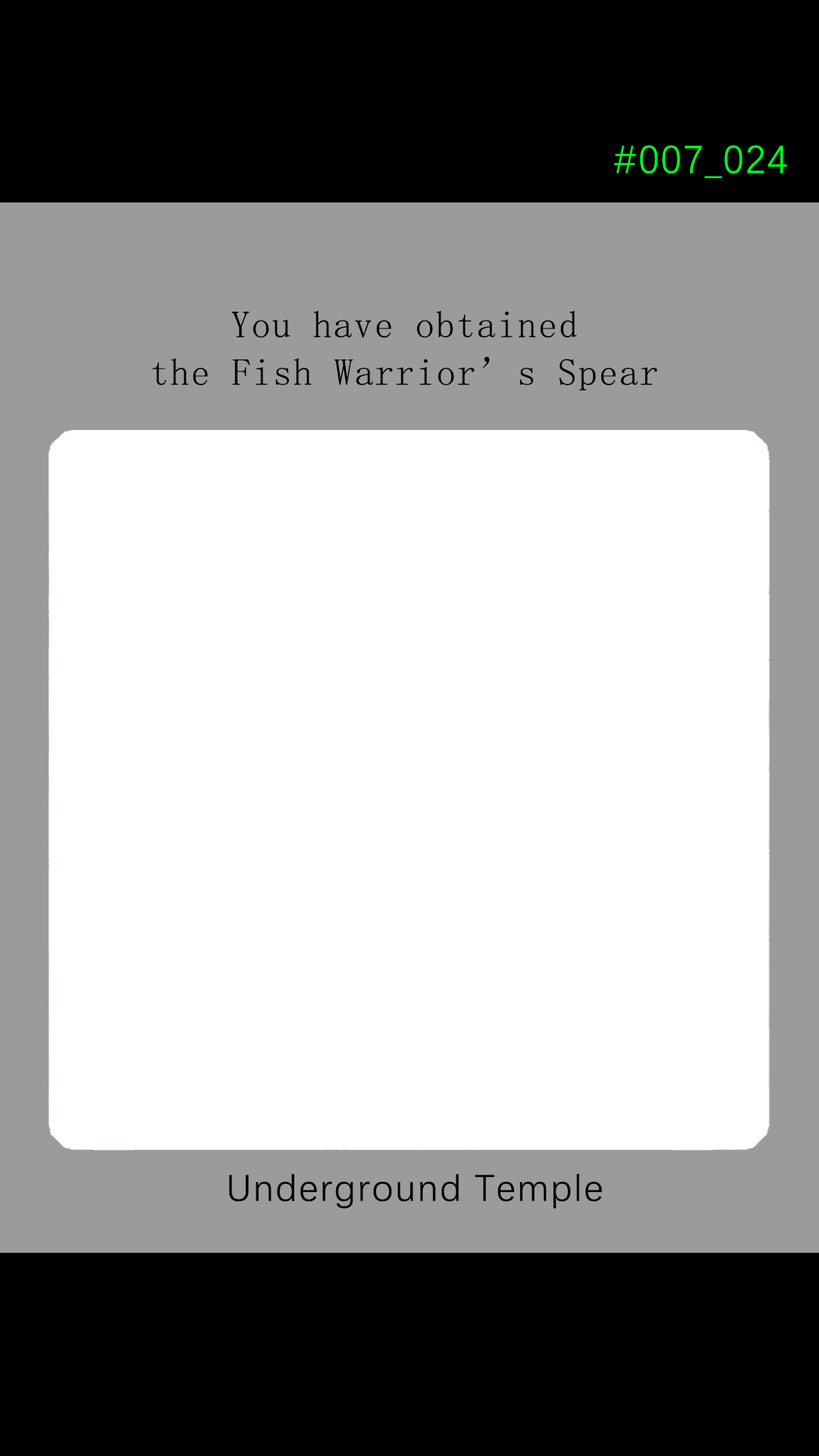
<style>
.page{position:relative;width:819px;height:1456px;background:#ffffff}
.page>*{position:absolute;margin:0}
.t1{font:39.2px "DengXian-Regular";letter-spacing:0.04em;color:#00ff1e}
.t2{font:37.9px/47.6px "SimSun";letter-spacing:0.04em;color:#000000}
.t3{font:37.9px "DengXian-Regular";letter-spacing:0.04em;color:#000000}
</style>
<div class="page">
<p class="t1" style="left:614px;top:145px;width:173px;height:33px">#007_024</p>
<p class="t2" style="left:152px;top:310px;width:505px;height:81px;text-align:center">You have obtained <br>the Fish Warrior’s Spear</p>
<p class="t3" style="left:229px;top:1174px;width:373px;height:35px">Underground Temple</p>
</div>
